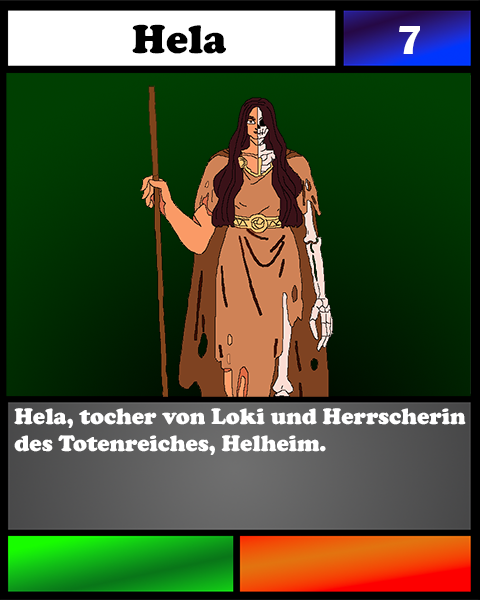
<style>
.page{position:relative;width:480px;height:600px}
.page>*{position:absolute;margin:0}
.t1{font:41.7px "CooperBlack";color:#000000}
.t2{font:41.7px "BritannicBold";color:#ffffff}
.t3{font:23.1px "CooperBlack";color:#ffffff}
</style>
<div class="page">
<p class="t1" style="left:132px;top:24px;width:94px;height:30px">Hela</p>
<p class="t2" style="left:399px;top:26px;width:21px;height:28px">7</p>
<p class="t3" style="left:14px;top:408px;width:452px;height:47px">Hela, tocher von Loki und Herrscherin des Totenreiches, Helheim.</p>
</div>
